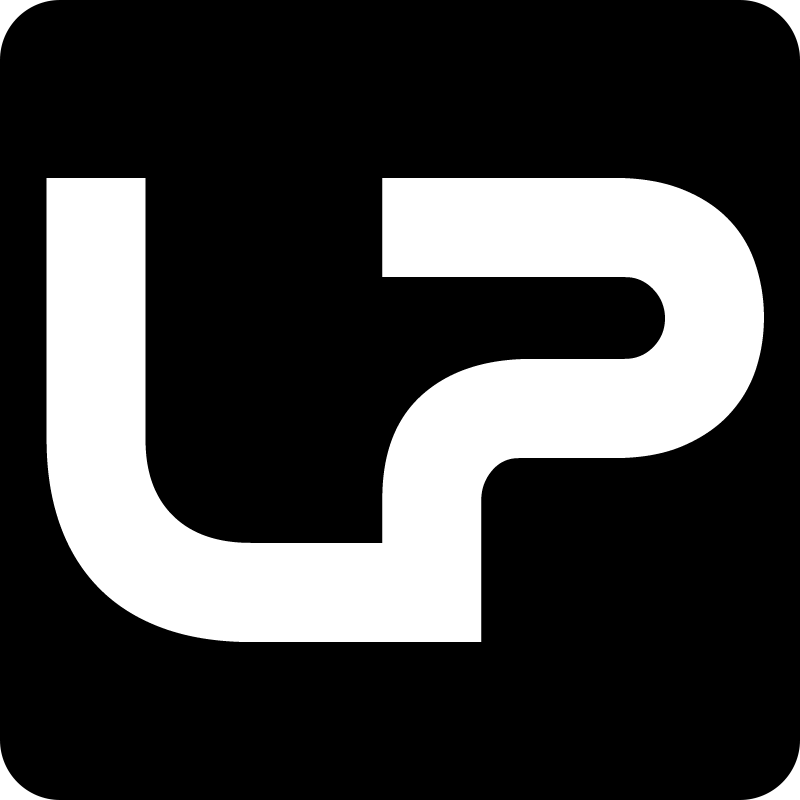
<style>
.page{position:relative;width:800px;height:800px;background:#000000}
.page>*{position:absolute;margin:0}
.t1{font:705px "Nasalization";letter-spacing:-0.1em;color:#ffffff;text-transform:uppercase}
</style>
<div class="page">
<p class="t1" style="left:46px;top:178px;width:718px;height:464px">LP</p>
</div>
